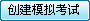
<style>
.page{position:relative;width:90px;height:21px}
.page>*{position:absolute;margin:0}
.t1{font:12px "SimSun";color:#000000}
</style>
<div class="page">
<p class="t1" style="left:8px;top:4px;width:71px;height:11px">创建模拟考试</p>
</div>
